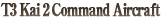
<style>
.page{position:relative;width:163px;height:18px;background:#ffffff}
.page>*{position:absolute;margin:0}
.t1{font:17px "RyuminPro-ExBold";letter-spacing:-0.11em;color:#4a3f32;font-weight:bold;scale:0.8 1}
</style>
<div class="page">
<p class="t1" style="left:0px;top:3px;width:161px;height:14px">T3 Kai 2 Command Aircraft</p>
</div>
